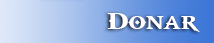
<style>
.page{position:relative;width:214px;height:43px}
.page>*{position:absolute;margin:0}
.t1{font:26px "GodOfWar";color:#ffffff}
</style>
<div class="page">
<p class="t1" style="left:107px;top:13px;width:93px;height:19px">Donar</p>
</div>
